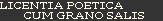
<style>
.page{position:relative;width:163px;height:21px;background:#333333}
.page>*{position:absolute;margin:0}
.t1{font:10px/10px "Georgia";color:#fffbe6;scale:1.3 1}
</style>
<div class="page">
<p class="t1" style="left:0px;top:2px;width:144px;height:17px">LICENTIA POETICA <br>        CUM GRANO SALIS</p>
</div>
